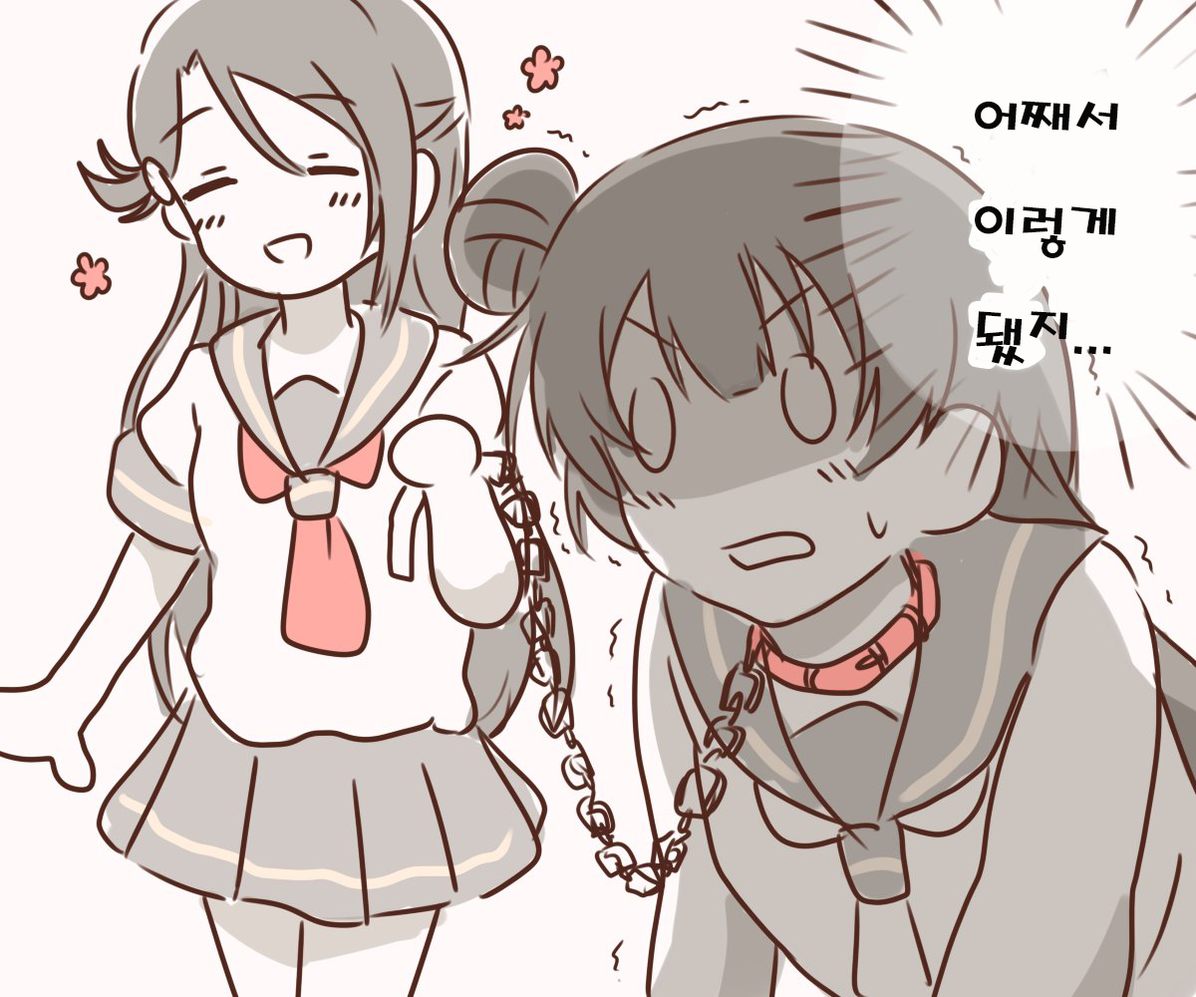
<style>
.page{position:relative;width:1196px;height:997px;background:#fff9f9}
.page>*{position:absolute;margin:0}
.t1{font:59.8px "MagicR-HM";color:#060606}
</style>
<div class="page">
<p class="t1" style="left:975px;top:101px;width:143px;height:265px">어째서<br>이렇게<br>됐지...</p>
</div>
